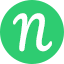
<style>
.page{position:relative;width:64px;height:64px;background:#2ecc71}
.page>*{position:absolute;margin:0}
.t1{font:44.3px "Pacifico-Regular";color:#ffffff;scale:0.87 1}
</style>
<div class="page">
<p class="t1" style="left:13px;top:13px;width:39px;height:39px">N</p>
</div>
